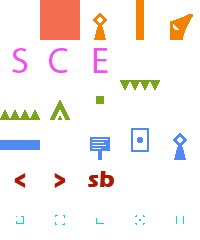
<style>
.page{position:relative;width:200px;height:240px;background:#ffffff}
.page>*{position:absolute;margin:0}
.t1{font:36px "MyriadPro-Regular";color:#f14ff3}
.t2{font:24px "ErasITC-Bold";color:#aa1901}
</style>
<div class="page">
<p class="t1" style="left:12px;top:48px;width:16px;height:25px">S</p>
<p class="t1" style="left:49px;top:48px;width:19px;height:25px">C</p>
<p class="t1" style="left:93px;top:48px;width:15px;height:25px">E</p>
<p class="t2" style="left:14px;top:173px;width:12px;height:15px">&lt;</p>
<p class="t2" style="left:54px;top:173px;width:12px;height:15px">&gt;</p>
<p class="t2" style="left:88px;top:171px;width:26px;height:16px">sb</p>
</div>
